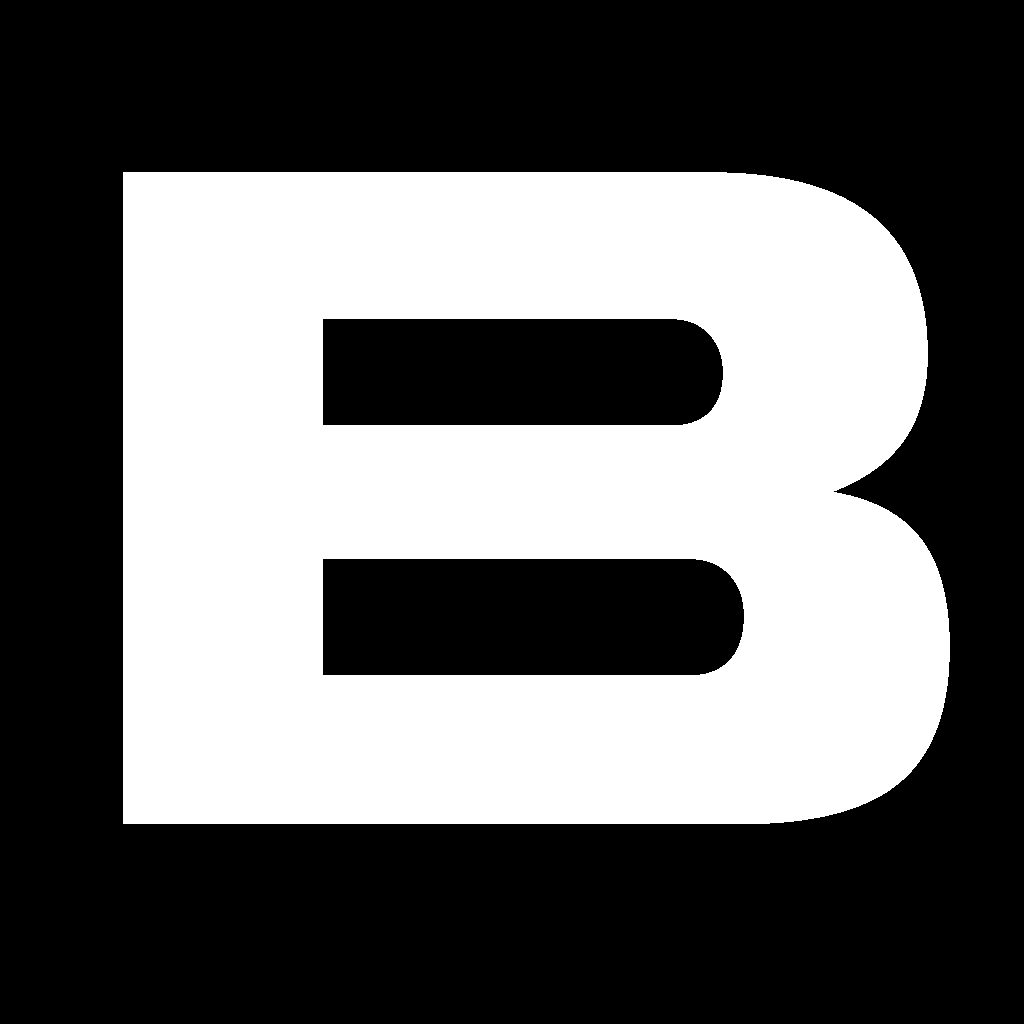
<style>
.page{position:relative;width:1024px;height:1024px;background:#000000}
.page>*{position:absolute;margin:0}
.t1{font:895.8px "Square721BT-BoldExtended";color:#ffffff}
</style>
<div class="page">
<p class="t1" style="left:123px;top:172px;width:827px;height:652px">B</p>
</div>
